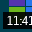
<style>
.page{position:relative;width:32px;height:32px;background:#004050}
.page>*{position:absolute;margin:0}
.t1{font:12px "SegoeUI-Light";color:#ffffff}
</style>
<div class="page">
<p class="t1" style="left:7px;top:16px;width:27px;height:9px">11:41</p>
</div>
